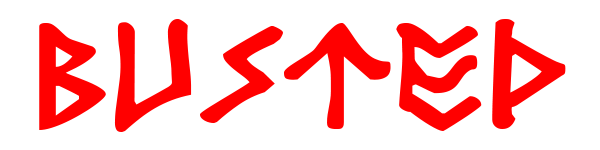
<style>
.page{position:relative;width:600px;height:150px;background:#ffffff}
.page>*{position:absolute;margin:0}
.t1{font:150px "Rosicrucian";color:#ff0000}
</style>
<div class="page">
<p class="t1" style="left:39px;top:19px;width:527px;height:113px">Busted</p>
</div>
